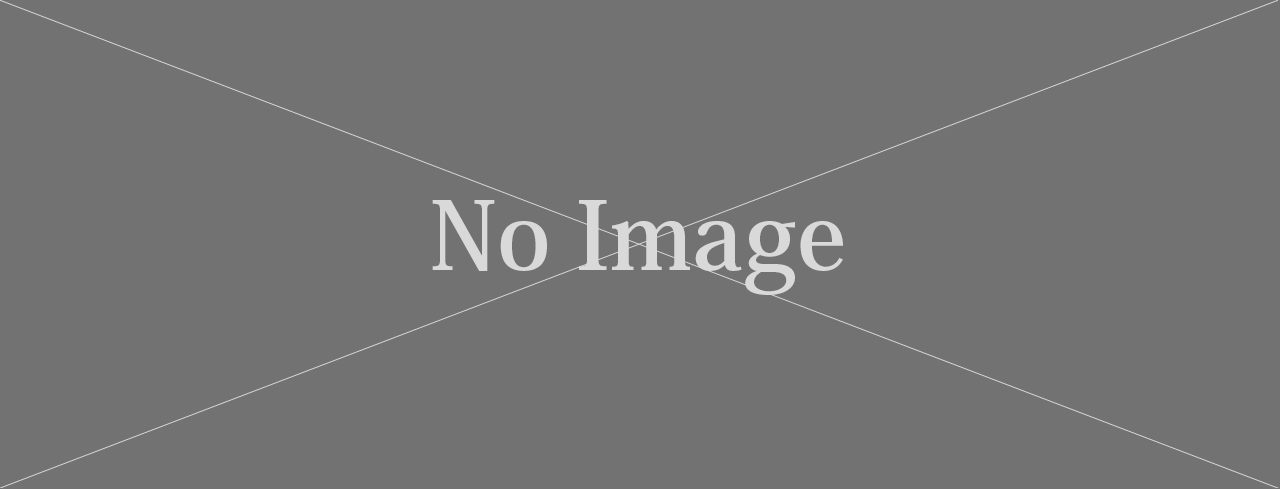
<style>
.page{position:relative;width:1280px;height:489px;background:#727272}
.page>*{position:absolute;margin:0}
.t1{font:94.1px "KozMinPro-Bold";color:#d9d9d9}
</style>
<div class="page">
<p class="t1" style="left:432px;top:200px;width:411px;height:95px">No Image</p>
</div>
